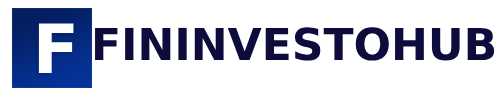
<style>
.page{position:relative;width:500px;height:100px;background:#ffffff}
.page>*{position:absolute;margin:0}
.t1{font:68px "ClarendonBT-Bold";color:#ffffff;text-transform:uppercase}
.t2{font:44px "ClarendonBT-Bold";color:#0e0c3d;text-transform:uppercase}
</style>
<div class="page">
<p class="t1" style="left:38px;top:23px;width:36px;height:50px">F</p>
<p class="t2" style="left:95px;top:27px;width:400px;height:34px">FinInvestoHub</p>
</div>
